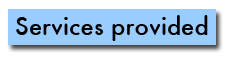
<style>
.page{position:relative;width:227px;height:57px;background:#99ccff}
.page>*{position:absolute;margin:0}
.t1{font:24px "Station-Medium";color:#000000}
</style>
<div class="page">
<p class="t1" style="left:16px;top:15px;width:192px;height:26px">Services provided</p>
</div>
